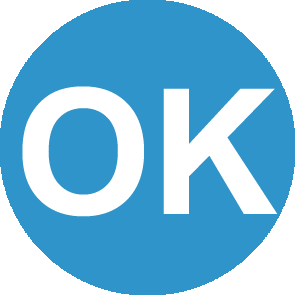
<style>
.page{position:relative;width:296px;height:296px;background:#2f94c9}
.page>*{position:absolute;margin:0}
.t1{font:175px "Arial-BoldMT";color:#ffffff}
</style>
<div class="page">
<p class="t1" style="left:22px;top:86px;width:256px;height:131px">OK</p>
</div>
